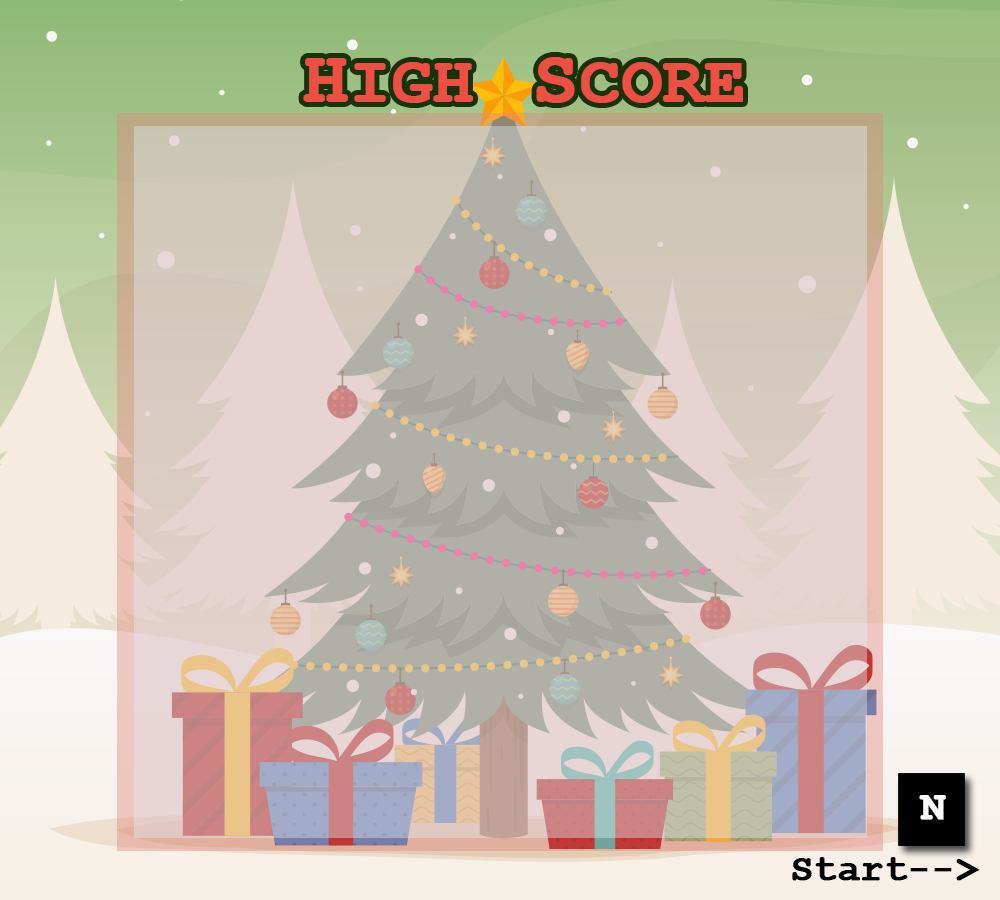
<style>
.page{position:relative;width:1000px;height:900px}
.page>*{position:absolute;margin:0}
.t1{font:66.7px "CourierNewPS-BoldMT";color:#ec4f44;font-weight:bold}
.t2{font:75px "CourierNewPS-BoldMT";color:#ec4f44;font-weight:bold}
.t3{font:41.7px "CourierNewPS-BoldMT";color:#fefefe;font-weight:bold}
.t4{font:37.5px "CourierNewPS-BoldMT";color:#000000;font-weight:bold}
</style>
<div class="page">
<p class="t1" style="left:303px;top:57px;width:440px;height:46px"><span class="t2">H</span>IGH  <span class="t2">S</span>CORE</p>
<p class="t3" style="left:919px;top:795px;width:27px;height:25px">N</p>
<p class="t4" style="left:792px;top:857px;width:187px;height:24px">Start--&gt;</p>
</div>
